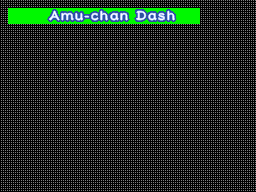
<style>
.page{position:relative;width:256px;height:192px;background:#000000}
.page>*{position:absolute;margin:0}
.t1{font:16.5px "DFLeiShoStd-W5";letter-spacing:0.075em;color:#ffffff}
</style>
<div class="page">
<p class="t1" style="left:49px;top:11px;width:126px;height:9px">Amu-chan Dash</p>
</div>
